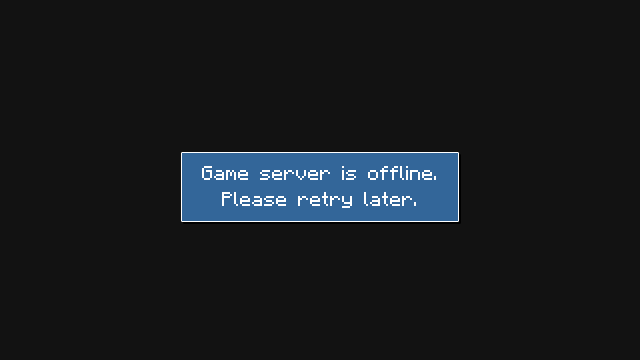
<style>
.page{position:relative;width:640px;height:360px;background:#121212}
.page>*{position:absolute;margin:0}
.t1{font:16px/26.4px "Minecraftia";color:#ffffff}
</style>
<div class="page">
<p class="t1" style="left:202px;top:166px;width:234px;height:42px;text-align:center">Game server is offline.<br>Please retry later.</p>
</div>
